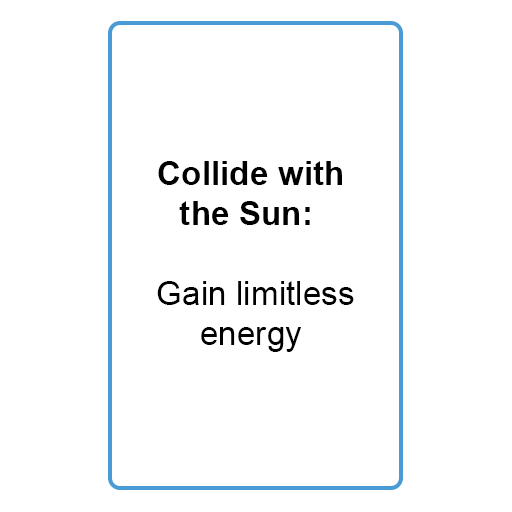
<style>
.page{position:relative;width:512px;height:512px;background:#ffffff}
.page>*{position:absolute;margin:0}
.t1{font:33.3px "Arial-BoldMT";color:#000000}
.t2{font:33.3px "ArialMT";color:#000000}
</style>
<div class="page">
<p class="t1" style="left:157px;top:161px;width:197px;height:191px;text-align:center">Collide with<br>the Sun: <br><span class="t2"><br> Gain limitless<br>energy</span></p>
</div>
